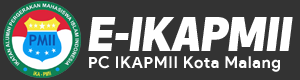
<style>
.page{position:relative;width:300px;height:80px;background:#333333}
.page>*{position:absolute;margin:0}
.t1{font:45.3px "ApexNew-HeavyItalic";color:#ffffff}
.t2{font:16.2px "ProductSans-Bold";letter-spacing:0.04em;color:#ffffff}
</style>
<div class="page">
<p class="t1" style="left:88px;top:17px;width:205px;height:34px">E-IKAPMII</p>
<p class="t2" style="left:89px;top:56px;width:191px;height:16px">PC IKAPMII Kota Malang</p>
</div>
